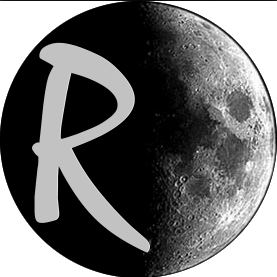
<style>
.page{position:relative;width:277px;height:277px;background:#000000}
.page>*{position:absolute;margin:0}
.t1{font:87.1px "Borealis";color:#c2c2c2}
.t2{font:76px "Borealis";color:#c2c2c2}
</style>
<div class="page">
<p class="t1" style="left:32px;top:41px;width:118px;height:211px">R</p>
<p class="t2" style="left:28px;top:54px;width:104px;height:184px">R</p>
</div>
